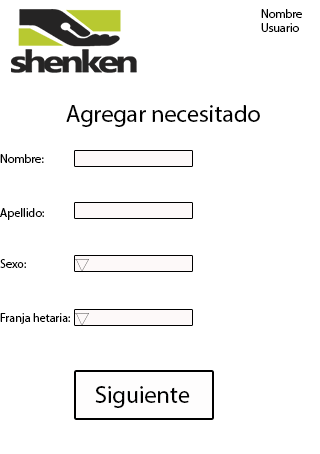
<style>
.page{position:relative;width:320px;height:454px;background:#ffffff}
.page>*{position:absolute;margin:0}
.t1{font:12px "MyriadPro-Regular";color:#000000}
.t2{font:24px "MyriadPro-Regular";color:#000000}
.t3{font:12px "MyriadPro-Regular";color:#030303}
</style>
<div class="page">
<p class="t1" style="left:261px;top:9px;width:41px;height:23px">Nombre Usuario</p>
<p class="t2" style="left:66px;top:105px;width:194px;height:22px">Agregar necesitado</p>
<p class="t1" style="left:0px;top:154px;width:44px;height:9px">Nombre:</p>
<p class="t3" style="left:0px;top:208px;width:44px;height:12px">Apellido:</p>
<p class="t1" style="left:0px;top:259px;width:26px;height:9px">Sexo:</p>
<p class="t1" style="left:0px;top:313px;width:70px;height:11px">Franja hetaria:</p>
<p class="t2" style="left:95px;top:386px;width:95px;height:22px">Siguiente</p>
</div>
